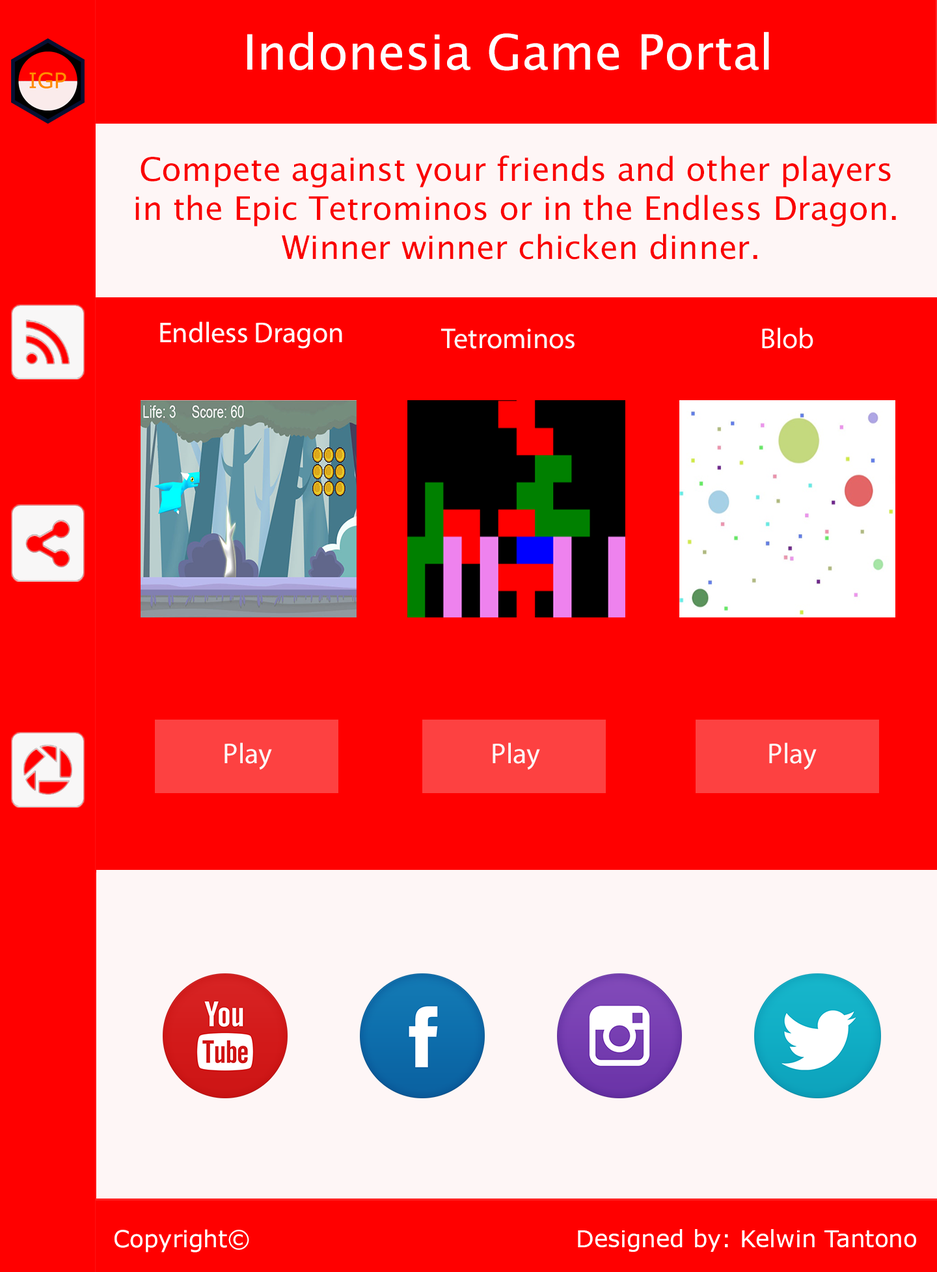
<style>
.page{position:relative;width:937px;height:1272px;background:#ff0000}
.page>*{position:absolute;margin:0}
.t1{font:48.8px "LucidaSans";color:#fefefe}
.t2{font:32.5px "LucidaSans";color:#fa0000}
.t3{font:28.6px "MyriadPro-Regular";color:#fefdfd}
.t4{font:28.6px "MyriadPro-Regular";color:#faf8f8}
.t5{font:28.6px "MyriadPro-Regular";color:#fcf9f8}
.t6{font:23.4px "MSReferenceSansSerif";color:#ffffff}
</style>
<div class="page">
<p class="t1" style="left:247px;top:32px;width:522px;height:39px">Indonesia Game Portal</p>
<p class="t2" style="left:135px;top:156px;width:761px;height:104px;text-align:center">Compete against your friends and other players <br>in the Epic Tetrominos or in the Endless Dragon. <br>Winner winner chicken dinner.</p>
<p class="t3" style="left:160px;top:322px;width:182px;height:27px">Endless Dragon</p>
<p class="t4" style="left:441px;top:329px;width:134px;height:20px">Tetrominos</p>
<p class="t5" style="left:225px;top:743px;width:47px;height:27px">Play</p>
<p class="t5" style="left:493px;top:743px;width:47px;height:27px">Play</p>
<p class="t5" style="left:769px;top:743px;width:48px;height:27px">Play</p>
<p class="t6" style="left:115px;top:1229px;width:134px;height:24px">Copyright©</p>
<p class="t6" style="left:578px;top:1229px;width:338px;height:23px">Designed by: Kelwin Tantono</p>
</div>
